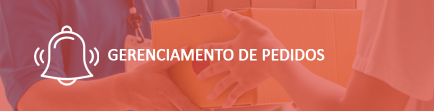
<style>
.page{position:relative;width:434px;height:111px}
.page>*{position:absolute;margin:0}
.t1{font:16.6px "Calibri";color:#ffffff;font-weight:bold}
</style>
<div class="page">
<p class="t1" style="left:108px;top:49px;width:217px;height:12px">GERENCIAMENTO DE PEDIDOS</p>
</div>
